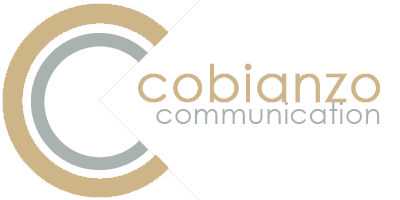
<style>
.page{position:relative;width:400px;height:200px;background:#ffffff}
.page>*{position:absolute;margin:0}
.t1{font:52px "CenturyGothic";letter-spacing:0.04em;color:#cdb587}
.t2{font:29px "CenturyGothic";letter-spacing:0.02em;color:#aab2b1}
</style>
<div class="page">
<p class="t1" style="left:138px;top:64px;width:242px;height:38px">cobianzo</p>
<p class="t2" style="left:156px;top:102px;width:224px;height:22px">communication</p>
</div>
